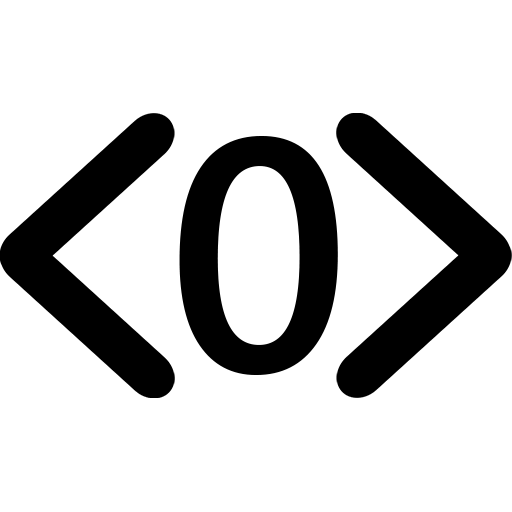
<style>
.page{position:relative;width:512px;height:512px;background:#ffffff}
.page>*{position:absolute;margin:0}
.t1{font:329.7px "SegoeUI-Semibold";color:#000000}
</style>
<div class="page">
<p class="t1" style="left:179px;top:136px;width:159px;height:239px">0</p>
</div>
